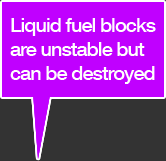
<style>
.page{position:relative;width:166px;height:161px;background:#c000ff}
.page>*{position:absolute;margin:0}
.t1{font:20px "HelveticaNeue-Medium";letter-spacing:-0.05em;color:#ffffff}
</style>
<div class="page">
<p class="t1" style="left:10px;top:18px;width:146px;height:66px">Liquid fuel blocks<br>are unstable but<br>can be destroyed</p>
</div>
